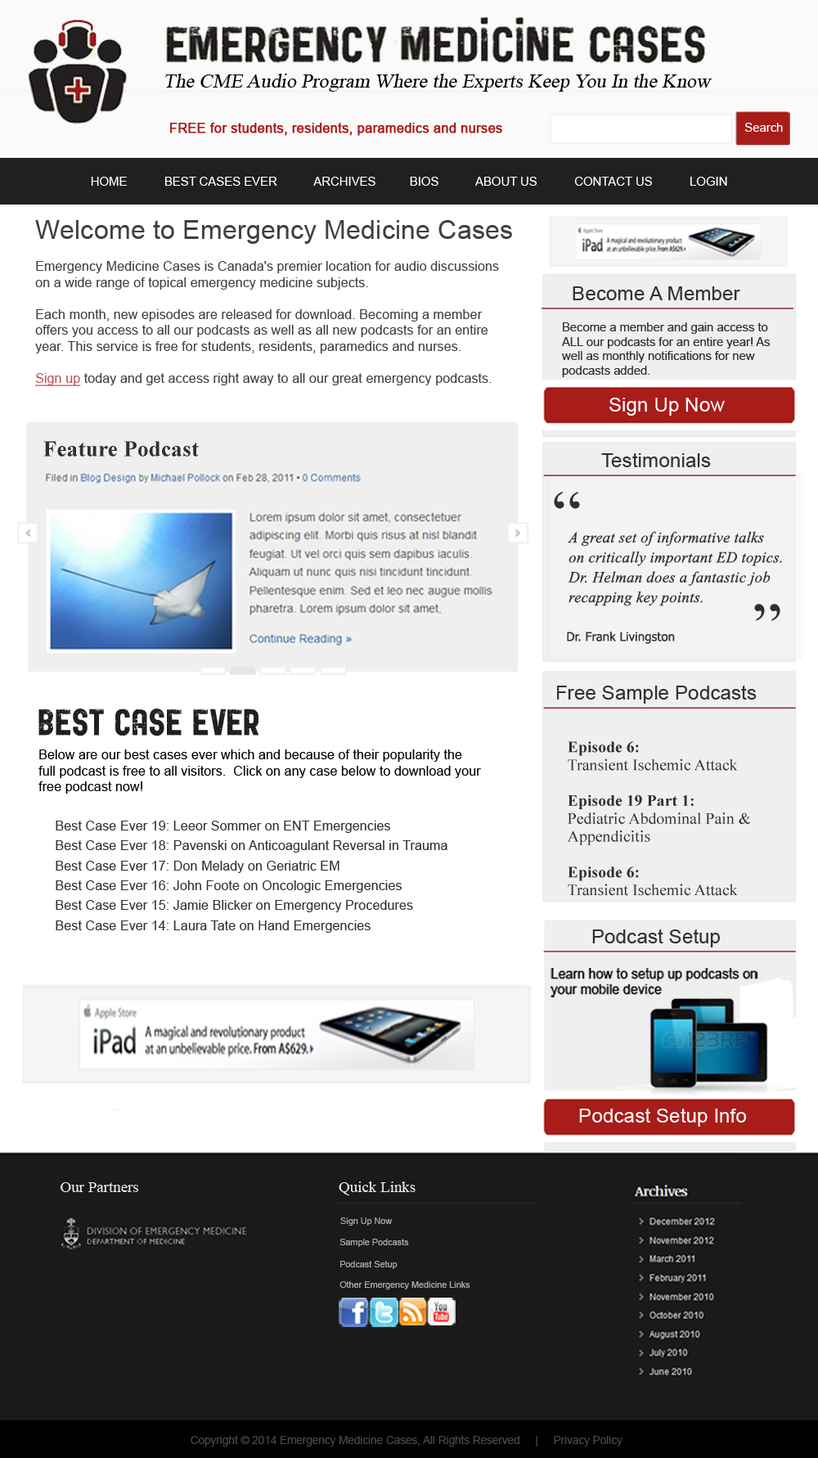
<style>
.page{position:relative;width:818px;height:1458px;background:#ffffff}
.page>*{position:absolute;margin:0}
.t1{font:19.9px "TimesNewRomanPSMT";color:#010101;font-style:italic}
.t2{font:13.3px "ArialMT";color:#a81c1a;font-weight:bold}
.t3{font:12.2px "ArialMT";color:#fefefe}
.t4{font:12.2px "ArialMT";color:#ffffff}
.t5{font:13.3px "ArialMT";color:#404040}
.t6{font:26.6px "ArialMT";color:#404040}
.t7{font:13.3px "ArialMT";color:#404040;text-decoration:underline}
.t8{font:19.9px "ArialMT";color:#332f2f}
.t9{font:12.1px "ArialMT";color:#332f2f}
.t10{font:19.9px "ArialMT";color:#ffffff}
.t11{font:22.1px "TimesNewRomanPS-BoldMT";letter-spacing:0.01em;color:#332f2f}
.t12{font:66.4px "TimesNewRomanPSMT";letter-spacing:0.01em;color:#332f2f}
.t13{font:15.5px/19.9px "TimesNewRomanPS-ItalicMT";letter-spacing:0.01em;color:#332f2f}
.t14{font:12.2px "Tahoma";letter-spacing:0.01em;color:#332f2f}
.t15{font:13.3px "ArialMT";color:#000000}
.t16{font:15.9px/17.9px "TimesNewRomanPSMT";letter-spacing:0.01em;color:#332f2f}
.t17{font:15.9px/17.9px "TimesNewRomanPS-BoldMT";letter-spacing:0.01em;color:#332f2f}
.t18{font:13.3px/19.9px "ArialMT";color:#332f2f}
.t19{font:15.5px "TimesNewRomanPSMT";color:#ebe9e9}
.t20{font:8.9px "ArialMT";color:#acacac}
.t21{font:11.1px "ArialMT";color:#494848}
</style>
<div class="page">
<p class="t1" style="left:165px;top:74px;width:547px;height:18px">The CME Audio Program Where the Experts Keep You In the Know</p>
<p class="t2" style="left:170px;top:123px;width:332px;height:13px">FREE for students, residents, paramedics and nurses</p>
<p class="t3" style="left:744px;top:123px;width:39px;height:9px">Search</p>
<p class="t4" style="left:91px;top:177px;width:636px;height:9px">HOME           BEST CASES EVER           ARCHIVES          BIOS           ABOUT US           CONTACT US           LOGIN</p>
<p class="t5" style="left:35px;top:220px;width:477px;height:166px"><span class="t6">Welcome to Emergency Medicine Cases <br></span><br>Emergency Medicine Cases is Canada's premier location for audio discussions <br>on a wide range of topical emergency medicine subjects. <br><br>Each month, new episodes are released for download. Becoming a member<br>offers you access to all our podcasts as well as all new podcasts for an entire <br>year. This service is free for students, residents, paramedics and nurses. <br><br><span class="t7">Sign up</span> today and get access right away to all our great emergency podcasts.</p>
<p class="t8" style="left:573px;top:286px;width:167px;height:14px">Become A Member</p>
<p class="t9" style="left:562px;top:322px;width:209px;height:55px">Become a member and gain access to<br>ALL our podcasts for an entire year! As <br>well as monthly notifications for new <br>podcasts added.</p>
<p class="t10" style="left:609px;top:398px;width:116px;height:18px">Sign Up Now</p>
<p class="t11" style="left:43px;top:441px;width:156px;height:15px">Feature Podcast</p>
<p class="t8" style="left:601px;top:452px;width:110px;height:15px">Testimonials</p>
<p class="t12" style="left:554px;top:492px;width:26px;height:17px">“</p>
<p class="t13" style="left:568px;top:531px;width:214px;height:75px">A great set of informative talks<br>on critically important ED topics.<br>Dr. Helman does a fantastic job <br>recapping key points.</p>
<p class="t12" style="left:754px;top:604px;width:26px;height:17px;rotate:180deg">“</p>
<p class="t14" style="left:567px;top:632px;width:108px;height:12px">Dr. Frank Livingston</p>
<p class="t8" style="left:557px;top:685px;width:200px;height:18px">Free Sample Podcasts</p>
<p class="t15" style="left:38px;top:749px;width:443px;height:44px">Below are our best cases ever which and because of their popularity the<br>full podcast is free to all visitors.  Click on any case below to download your<br>free podcast now!</p>
<p class="t16" style="left:567px;top:741px;width:184px;height:155px"><span class="t17">Episode 6: <br></span>Transient Ischemic Attack<br><br><span class="t17">Episode 19 Part 1: <br></span>Pediatric Abdominal Pain &amp; <br>Appendicitis<br><br><span class="t17">Episode 6: <br></span>Transient Ischemic Attack</p>
<p class="t18" style="left:56px;top:820px;width:391px;height:113px">Best Case Ever 19: Leeor Sommer on ENT Emergencies<br>Best Case Ever 18: Pavenski on Anticoagulant Reversal in Trauma<br>Best Case Ever 17: Don Melady on Geriatric EM<br>Best Case Ever 16: John Foote on Oncologic Emergencies<br>Best Case Ever 15: Jamie Blicker on Emergency Procedures<br>Best Case Ever 14: Laura Tate on Hand Emergencies</p>
<p class="t8" style="left:592px;top:928px;width:128px;height:19px">Podcast Setup</p>
<p class="t10" style="left:579px;top:1108px;width:168px;height:18px">Podcast Setup Info</p>
<p class="t19" style="left:339px;top:1181px;width:77px;height:14px">Quick Links</p>
<p class="t19" style="left:61px;top:1182px;width:78px;height:10px">Our Partners</p>
<p class="t20" style="left:340px;top:1217px;width:53px;height:8px">Sign Up Now</p>
<p class="t20" style="left:339px;top:1238px;width:70px;height:9px">Sample Podcasts</p>
<p class="t20" style="left:340px;top:1261px;width:58px;height:8px">Podcast Setup</p>
<p class="t20" style="left:339px;top:1281px;width:131px;height:8px">Other Emergency Medicine Links</p>
<p class="t21" style="left:191px;top:1435px;width:432px;height:11px">Copyright © 2014 Emergency Medicine Cases, All Rights Reserved     |     Privacy Policy</p>
</div>
